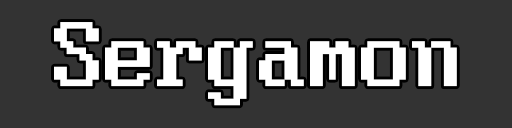
<style>
.page{position:relative;width:512px;height:128px;background:#333333}
.page>*{position:absolute;margin:0}
.t1{font:102.3px "SergamonRegular";color:#ffffff}
</style>
<div class="page">
<p class="t1" style="left:54px;top:22px;width:403px;height:84px">Sergamon</p>
</div>
